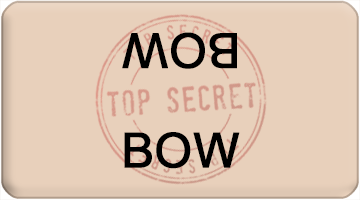
<style>
.page{position:relative;width:360px;height:200px;background:#e8d0bb}
.page>*{position:absolute;margin:0}
.t1{font:48px "ArialMT";color:#000000;font-weight:bold}
</style>
<div class="page">
<p class="t1" style="left:122px;top:32px;width:115px;height:37px;rotate:180deg">BOW</p>
<p class="t1" style="left:124px;top:132px;width:116px;height:37px">BOW</p>
</div>
